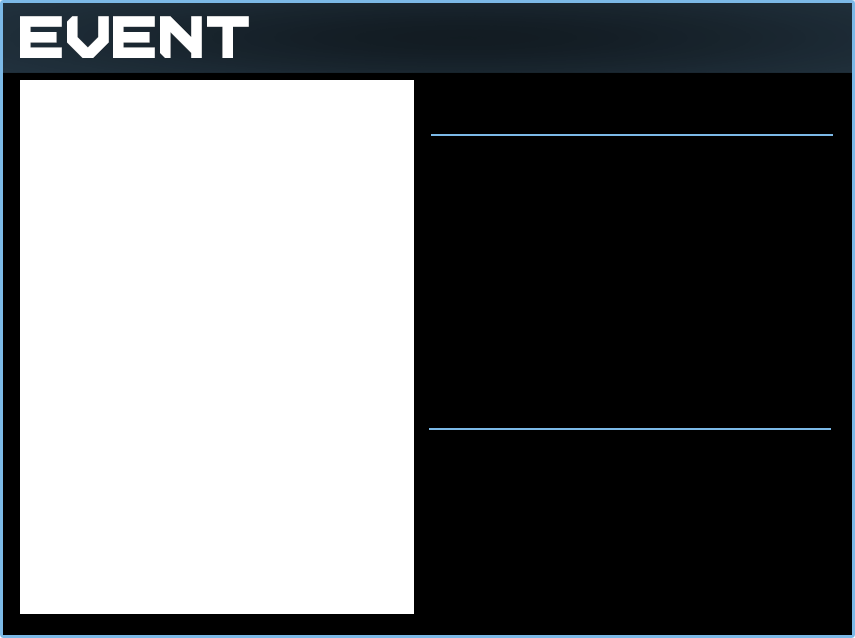
<style>
.page{position:relative;width:855px;height:638px;background:#000000}
.page>*{position:absolute;margin:0}
.t1{font:41.7px "Astrolab";color:#ffffff}
</style>
<div class="page">
<p class="t1" style="left:20px;top:16px;width:229px;height:42px">EVENT</p>
</div>
